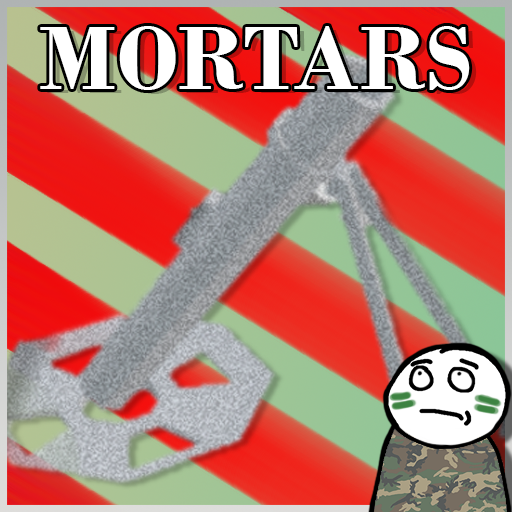
<style>
.page{position:relative;width:512px;height:512px}
.page>*{position:absolute;margin:0}
.t1{font:95.1px "BodoniMT-Bold";color:#ffffff}
</style>
<div class="page">
<p class="t1" style="left:40px;top:26px;width:430px;height:64px">MORTARS</p>
</div>
